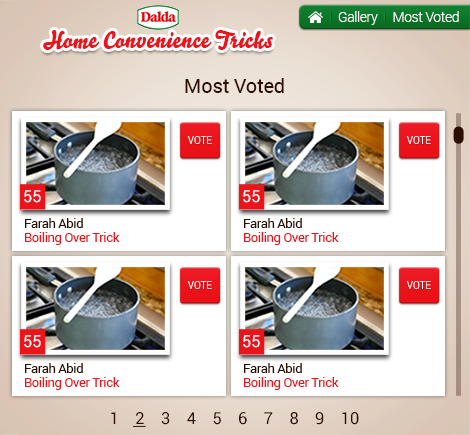
<style>
.page{position:relative;width:470px;height:435px;background:#ffffff}
.page>*{position:absolute;margin:0}
.t1{font:13.6px "Roboto-Light";letter-spacing:-0.025em;color:#ffffff}
.t2{font:22.8px "Bello-Script";letter-spacing:0.025em;color:#ec131b}
.t3{font:20px "Roboto-Regular";letter-spacing:-0.025em;color:#2b0e00}
.t4{font:11.3px "Roboto-Regular";color:#ffffff;text-transform:uppercase;scale:0.88 1}
.t5{font:16.5px "Roboto-Regular";color:#ffffff;text-transform:uppercase}
.t6{font:12.7px "Roboto-Regular";letter-spacing:-0.025em;color:#2b0e00}
.t7{font:12.7px "Roboto-Regular";letter-spacing:-0.025em;color:#ec131b}
.t8{font:16.5px "Roboto-Regular";color:#2b0e00}
</style>
<div class="page">
<p class="t1" style="left:338px;top:11px;width:121px;height:14px">Gallery     Most Voted</p>
<p class="t2" style="left:43px;top:30px;width:230px;height:20px">Home Convenience Tricks</p>
<p class="t3" style="left:185px;top:78px;width:99px;height:15px">Most Voted</p>
<p class="t4" style="left:187px;top:136px;width:25px;height:8px">VOTE</p>
<p class="t4" style="left:406px;top:136px;width:25px;height:8px">VOTE</p>
<p class="t5" style="left:24px;top:190px;width:17px;height:13px">55</p>
<p class="t5" style="left:243px;top:190px;width:17px;height:13px">55</p>
<p class="t6" style="left:25px;top:218px;width:58px;height:10px">Farah Abid</p>
<p class="t6" style="left:244px;top:218px;width:58px;height:10px">Farah Abid</p>
<p class="t7" style="left:25px;top:232px;width:95px;height:13px">Boiling Over Trick</p>
<p class="t7" style="left:244px;top:232px;width:95px;height:13px">Boiling Over Trick</p>
<p class="t4" style="left:187px;top:281px;width:25px;height:8px">VOTE</p>
<p class="t4" style="left:406px;top:281px;width:25px;height:8px">VOTE</p>
<p class="t5" style="left:24px;top:335px;width:17px;height:13px">55</p>
<p class="t5" style="left:243px;top:335px;width:17px;height:13px">55</p>
<p class="t6" style="left:25px;top:363px;width:58px;height:10px">Farah Abid</p>
<p class="t6" style="left:244px;top:363px;width:58px;height:10px">Farah Abid</p>
<p class="t7" style="left:25px;top:377px;width:95px;height:13px">Boiling Over Trick</p>
<p class="t7" style="left:244px;top:377px;width:95px;height:13px">Boiling Over Trick</p>
<p class="t8" style="left:111px;top:412px;width:248px;height:13px">1    2    3    4    5    6    7    8    9    10</p>
</div>
